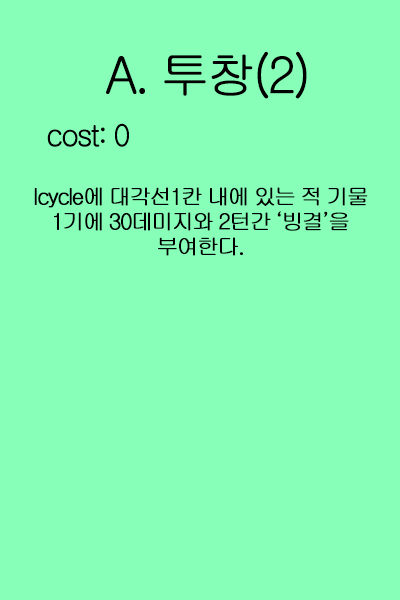
<style>
.page{position:relative;width:400px;height:600px;background:#88ffb8}
.page>*{position:absolute;margin:0}
.t1{font:50px "Gulim";letter-spacing:-0.1em;color:#000000;font-weight:bold}
.t2{font:30px "Gulim";letter-spacing:-0.1em;color:#000000;font-weight:bold}
.t3{font:22px/25px "Gulim";letter-spacing:-0.1em;color:#000000;font-weight:bold}
</style>
<div class="page">
<p class="t1" style="left:106px;top:51px;width:201px;height:48px">A. 투창(2)</p>
<p class="t2" style="left:47px;top:123px;width:82px;height:24px">cost: 0</p>
<p class="t3" style="left:34px;top:187px;width:334px;height:69px;text-align:center">Icycle에 대각선1칸 내에 있는 적 기물<br>1기에 30데미지와 2턴간 ‘빙결’을<br>부여한다.</p>
</div>
